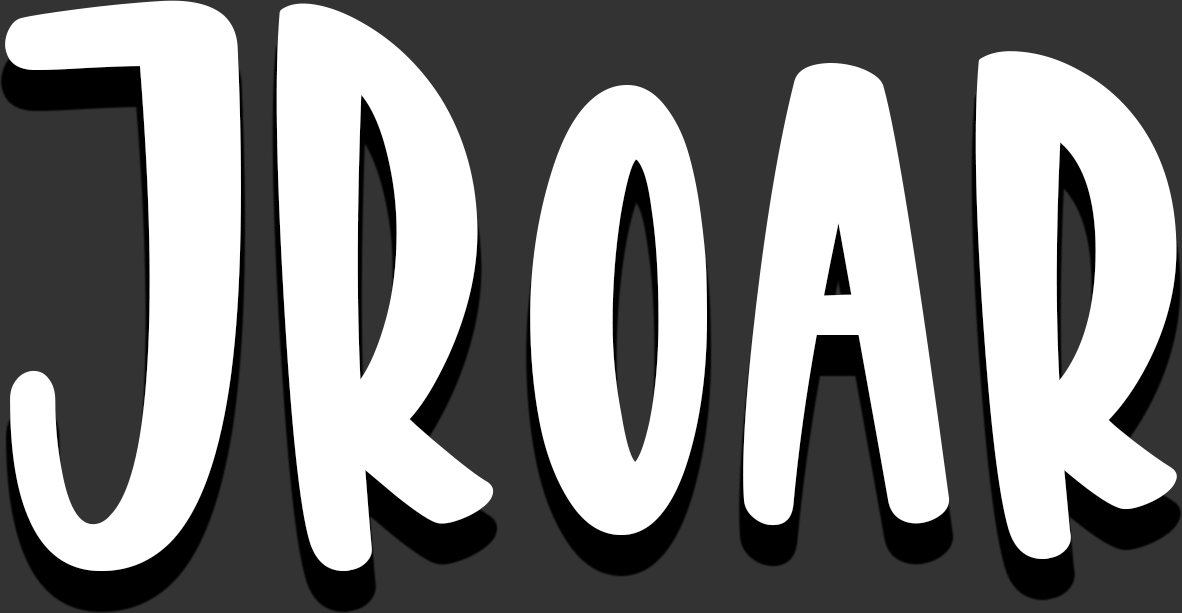
<style>
.page{position:relative;width:1182px;height:613px;background:#ffffff}
.page>*{position:absolute;margin:0}
.t1{font:806.6px "OrangeJuiceRegular";color:#ffffff}
</style>
<div class="page">
<p class="t1" style="left:5px;top:0px;width:1172px;height:571px">JRoar</p>
</div>
